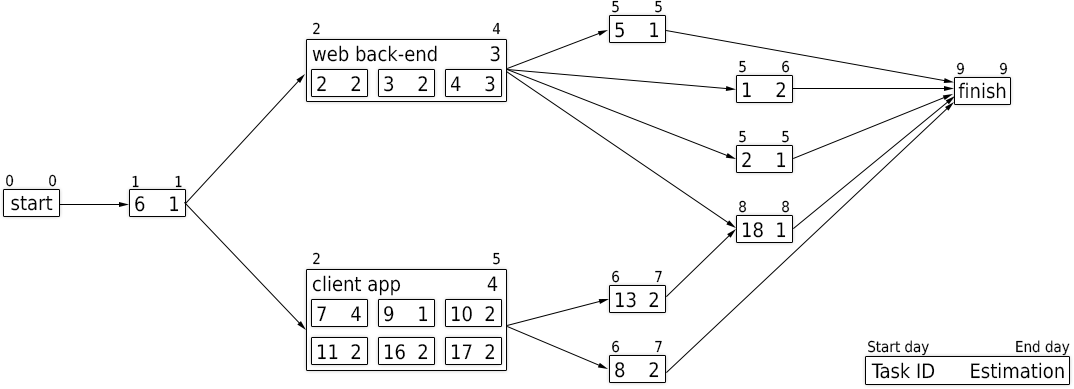
<style>
.page{position:relative;width:1074px;height:389px;background:#ffffff}
.page>*{position:absolute;margin:0}
.t1{font:15px "DejaVuSansCondensed";color:#000000}
.t2{font:20px "DejaVuSansCondensed";color:#000000}
.t3{font:15.1px "DejaVuSansCondensed";color:#000000}
.t4{font:20.1px "DejaVuSansCondensed";color:#000000}
.t5{font:14.9px "DejaVuSansCondensed";color:#000000}
.t6{font:19.9px "DejaVuSansCondensed";color:#000000}
</style>
<div class="page">
<p class="t1" style="left:612px;top:0px;width:50px;height:13px">5        5</p>
<p class="t1" style="left:313px;top:22px;width:188px;height:13px">2                                        4</p>
<p class="t2" style="left:615px;top:22px;width:44px;height:16px">5    1</p>
<p class="t2" style="left:312px;top:45px;width:188px;height:17px">web back-end         3</p>
<p class="t1" style="left:739px;top:60px;width:51px;height:13px">5        6</p>
<p class="t3" style="left:956px;top:62px;width:52px;height:13px">9        9</p>
<p class="t2" style="left:317px;top:76px;width:44px;height:16px">2    2</p>
<p class="t2" style="left:384px;top:76px;width:44px;height:16px">3    2</p>
<p class="t2" style="left:450px;top:76px;width:45px;height:16px">4    3</p>
<p class="t2" style="left:742px;top:82px;width:44px;height:16px">1    2</p>
<p class="t4" style="left:958px;top:82px;width:48px;height:17px">finish</p>
<p class="t1" style="left:739px;top:130px;width:50px;height:13px">5        5</p>
<p class="t2" style="left:742px;top:152px;width:44px;height:16px">2    1</p>
<p class="t3" style="left:6px;top:174px;width:51px;height:13px">0        0</p>
<p class="t5" style="left:132px;top:175px;width:50px;height:13px">1        1</p>
<p class="t4" style="left:11px;top:195px;width:42px;height:16px">start</p>
<p class="t6" style="left:135px;top:196px;width:44px;height:16px">6    1</p>
<p class="t1" style="left:739px;top:200px;width:51px;height:13px">8        8</p>
<p class="t2" style="left:742px;top:222px;width:44px;height:16px">18  1</p>
<p class="t1" style="left:313px;top:252px;width:187px;height:13px">2                                        5</p>
<p class="t1" style="left:612px;top:270px;width:50px;height:13px">6        7</p>
<p class="t2" style="left:312px;top:275px;width:186px;height:21px">client app               4</p>
<p class="t2" style="left:615px;top:292px;width:44px;height:16px">13  2</p>
<p class="t2" style="left:317px;top:306px;width:44px;height:16px">7    4</p>
<p class="t2" style="left:384px;top:306px;width:44px;height:16px">9    1</p>
<p class="t2" style="left:451px;top:306px;width:44px;height:16px">10  2</p>
<p class="t1" style="left:612px;top:340px;width:50px;height:13px">6        7</p>
<p class="t1" style="left:868px;top:340px;width:202px;height:16px">Start day                    End day</p>
<p class="t2" style="left:317px;top:344px;width:44px;height:16px">11  2</p>
<p class="t2" style="left:384px;top:344px;width:44px;height:16px">16  2</p>
<p class="t2" style="left:451px;top:344px;width:44px;height:16px">17  2</p>
<p class="t2" style="left:615px;top:362px;width:44px;height:16px">8    2</p>
<p class="t2" style="left:871px;top:362px;width:193px;height:17px">Task ID      Estimation</p>
</div>
